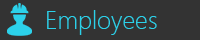
<style>
.page{position:relative;width:200px;height:40px;background:#333333}
.page>*{position:absolute;margin:0}
.t1{font:25px "SegoeUI-Light";color:#2cd1ea}
</style>
<div class="page">
<p class="t1" style="left:47px;top:10px;width:110px;height:25px">Employees</p>
</div>
